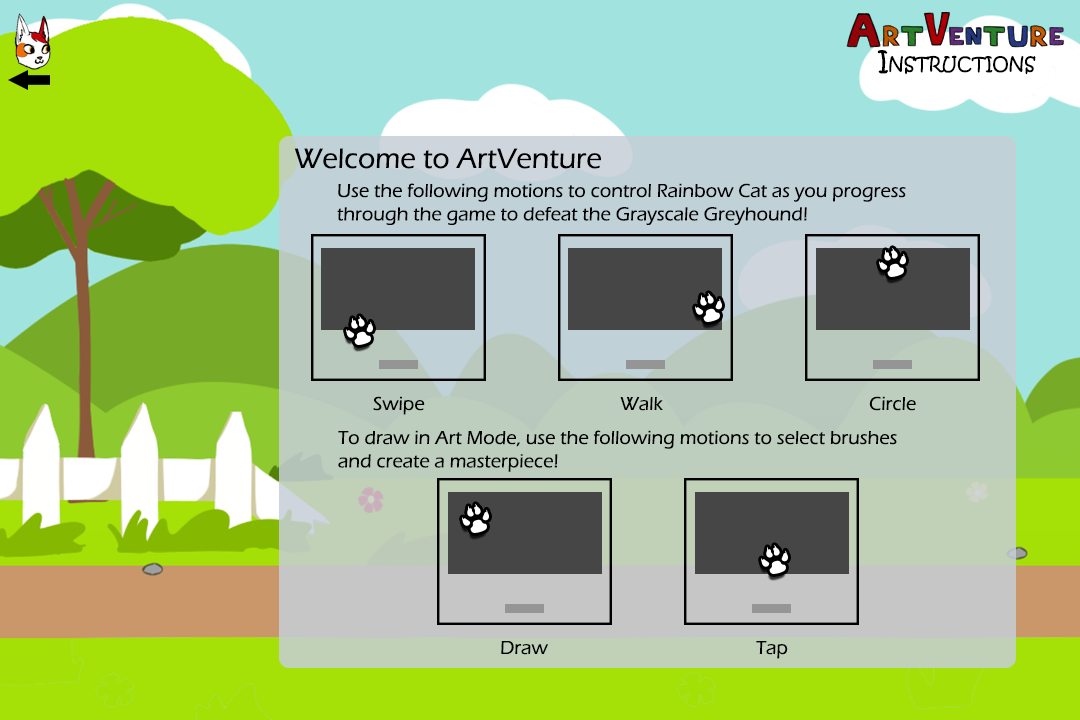
<style>
.page{position:relative;width:1080px;height:720px}
.page>*{position:absolute;margin:0}
.t1{font:25.7px "KristenITC-Regular";color:#000000;font-variant:small-caps}
.t2{font:29.2px "ErasITC-Medium";color:#000000}
.t3{font:19.4px "ErasITC-Medium";color:#000000}
</style>
<div class="page">
<p class="t1" style="left:877px;top:50px;width:159px;height:25px">Instructions</p>
<p class="t2" style="left:294px;top:148px;width:307px;height:21px">Welcome to ArtVenture</p>
<p class="t3" style="left:337px;top:183px;width:569px;height:42px">Use the following motions to control Rainbow Cat as you progress<br>through the game to defeat the Grayscale Greyhound!</p>
<p class="t3" style="left:373px;top:396px;width:52px;height:19px">Swipe</p>
<p class="t3" style="left:620px;top:397px;width:43px;height:14px">Walk</p>
<p class="t3" style="left:869px;top:396px;width:47px;height:15px">Circle</p>
<p class="t3" style="left:338px;top:430px;width:559px;height:42px">To draw in Art Mode, use the following motions to select brushes<br>and create a masterpiece!</p>
<p class="t3" style="left:501px;top:641px;width:47px;height:14px">Draw</p>
<p class="t3" style="left:756px;top:641px;width:32px;height:18px">Tap</p>
</div>
